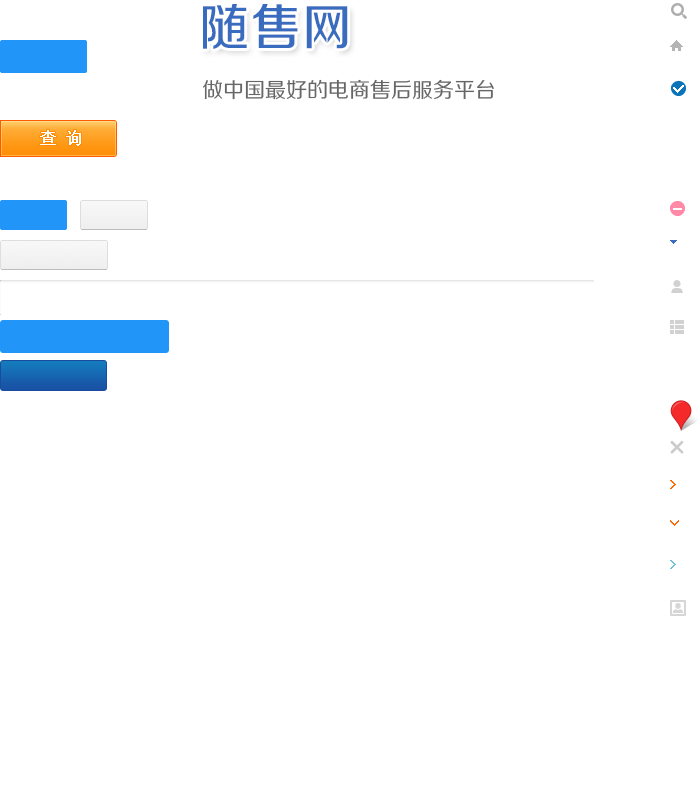
<style>
.page{position:relative;width:700px;height:800px;background:#ffffff}
.page>*{position:absolute;margin:0}
.t1{font:50px "FZZZHUNHJW--GB1-0";letter-spacing:0.03em;color:#396bbe}
.t2{font:21px "FZZHJW--GB1-0";color:#666666}
.t3{font:16px "SimSun";color:#ffffff;font-weight:bold}
</style>
<div class="page">
<p class="t1" style="left:203px;top:4px;width:145px;height:45px">随售网</p>
<p class="t2" style="left:203px;top:79px;width:291px;height:21px">做中国最好的电商售后服务平台</p>
<p class="t3" style="left:40px;top:130px;width:41px;height:16px">查 询</p>
</div>
